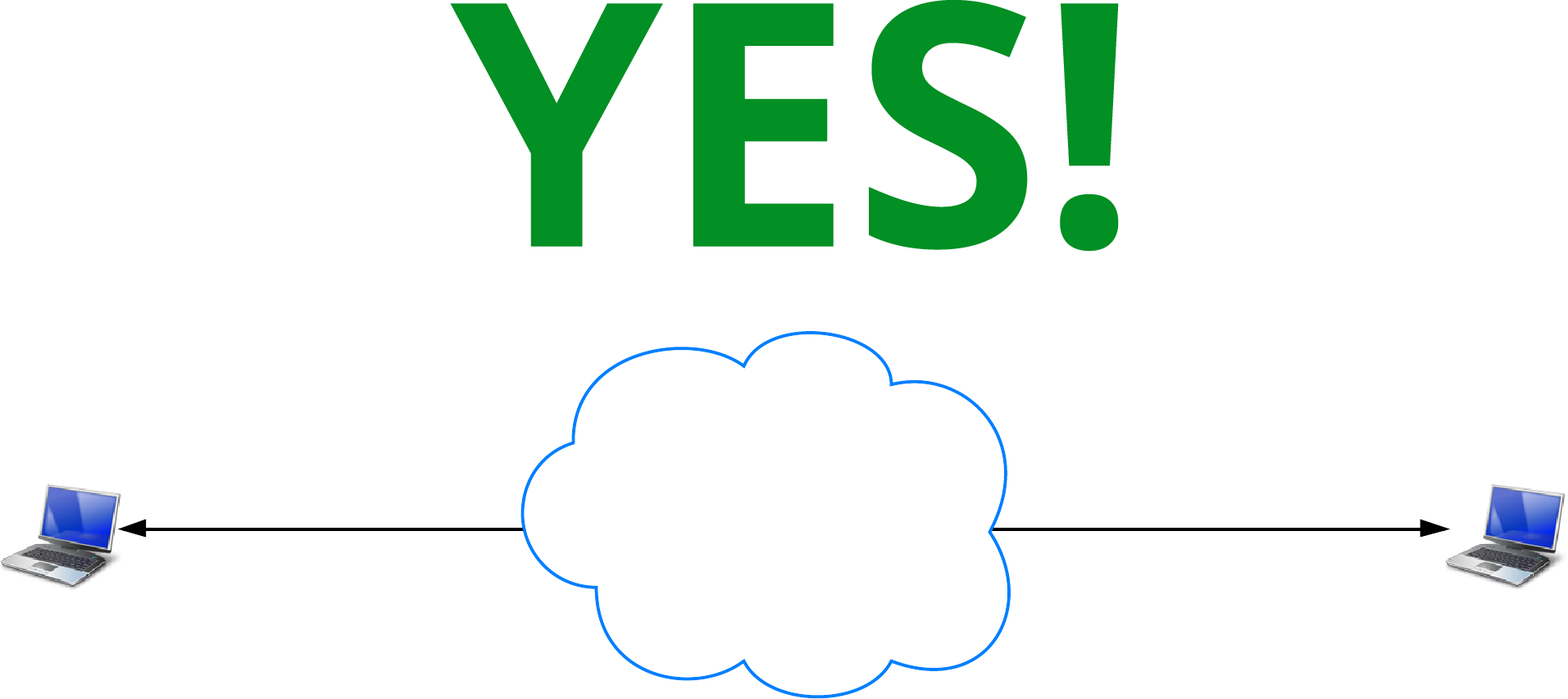
<style>
.page{position:relative;width:1568px;height:699px;background:#ffffff}
.page>*{position:absolute;margin:0}
.t1{font:340.2px "OpenSans-Bold";color:#028f23}
</style>
<div class="page">
<p class="t1" style="left:450px;top:0px;width:669px;height:252px">YES!</p>
</div>
